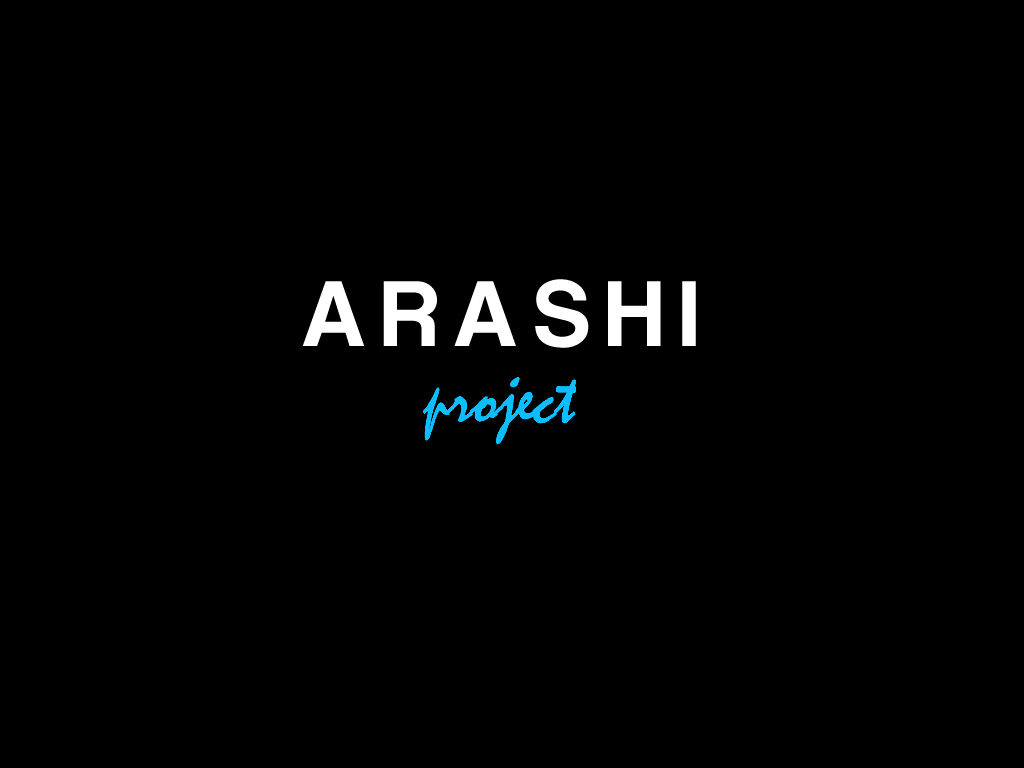
<style>
.page{position:relative;width:1024px;height:768px;background:#000000}
.page>*{position:absolute;margin:0}
.t1{font:90px "Coolvetica";letter-spacing:0.18em;color:#ffffff}
</style>
<div class="page">
<p class="t1" style="left:302px;top:279px;width:394px;height:69px">ARASHI</p>
</div>
